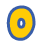
<style>
.page{position:relative;width:42px;height:56px;background:#ffffff}
.page>*{position:absolute;margin:0}
.t1{font:36px "PokemonSolidNormal";color:#ffcb05}
</style>
<div class="page">
<p class="t1" style="left:9px;top:8px;width:24px;height:30px">0</p>
</div>
